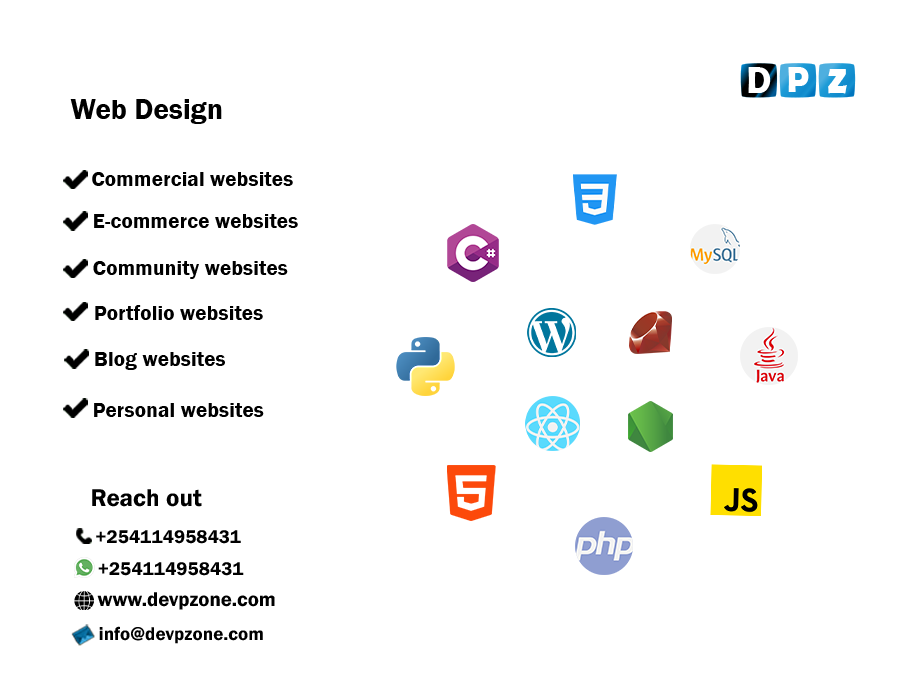
<style>
.page{position:relative;width:900px;height:700px;background:#ffffff}
.page>*{position:absolute;margin:0}
.t1{font:29.3px "FranklinGothic-Demi";color:#000000}
.t2{font:21.5px "FranklinGothic-Demi";color:#000000}
.t3{font:24.9px "FranklinGothic-Demi";color:#000000}
.t4{font:19.1px "FranklinGothic-Demi";color:#000000}
.t5{font:20.6px "FranklinGothic-Demi";color:#000000}
</style>
<div class="page">
<p class="t1" style="left:70px;top:99px;width:152px;height:25px">Web Design</p>
<p class="t2" style="left:92px;top:172px;width:201px;height:14px">Commercial websites</p>
<p class="t2" style="left:94px;top:214px;width:204px;height:14px">E-commerce websites</p>
<p class="t2" style="left:93px;top:261px;width:195px;height:18px">Community websites</p>
<p class="t2" style="left:95px;top:305px;width:168px;height:15px">Portfolio websites</p>
<p class="t2" style="left:95px;top:352px;width:130px;height:18px">Blog websites</p>
<p class="t2" style="left:94px;top:403px;width:170px;height:14px">Personal websites</p>
<p class="t3" style="left:92px;top:489px;width:110px;height:18px">Reach out</p>
<p class="t4" style="left:96px;top:530px;width:145px;height:14px">+254114958431</p>
<p class="t4" style="left:98px;top:562px;width:146px;height:14px">+254114958431</p>
<p class="t5" style="left:97px;top:592px;width:178px;height:18px">www.devpzone.com</p>
<p class="t4" style="left:99px;top:626px;width:164px;height:18px">info@devpzone.com</p>
</div>
